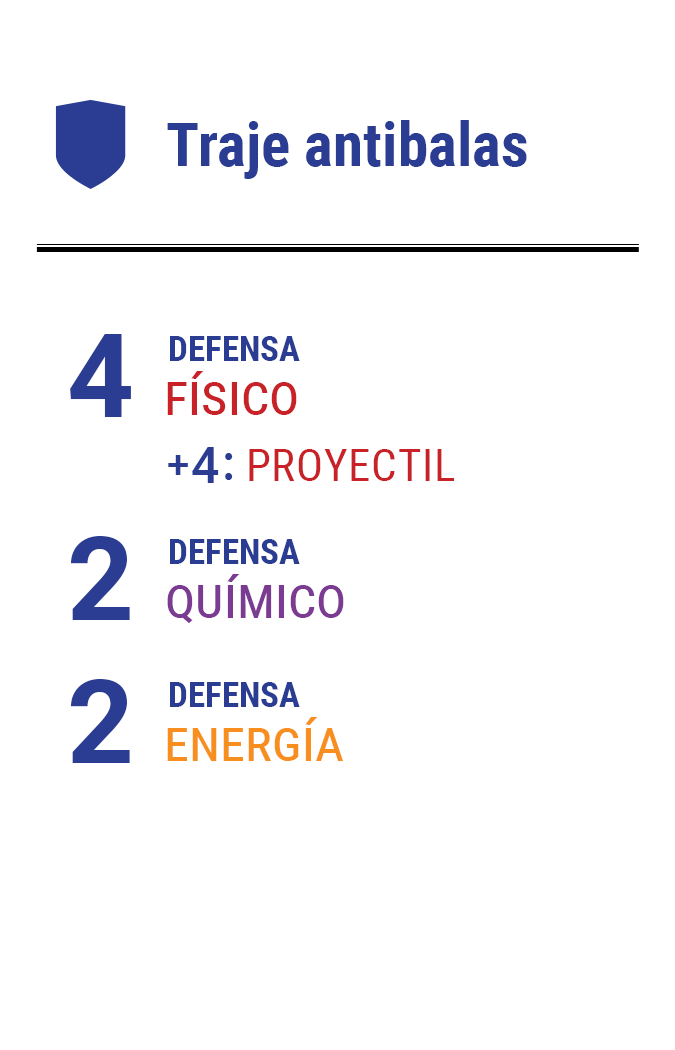
<style>
.page{position:relative;width:675px;height:1050px;background:#ffffff}
.page>*{position:absolute;margin:0}
.t1{font:61.2px "RobotoCondensed-Bold";color:#2a3d93}
.t2{font:116.7px "Roboto-Bold";letter-spacing:-0.16em;color:#2a3d93}
.t3{font:35px "RobotoCondensed-Bold";color:#2a3d93}
.t4{font:58.3px "RobotoCondensed-Regular";color:#c82127;font-variant:small-caps}
.t5{font:49.8px "Roboto-Medium";letter-spacing:-0.1em;color:#2a3d93}
.t6{font:39.7px "Roboto-Medium";letter-spacing:-0.1em;color:#2a3d93}
.t7{font:44.6px "RobotoCondensed-Regular";letter-spacing:0.02em;color:#c82127;text-transform:uppercase}
.t8{font:58.3px "RobotoCondensed-Regular";color:#7c3b92;font-variant:small-caps}
.t9{font:58.3px "RobotoCondensed-Regular";color:#f78e1e;font-variant:small-caps}
</style>
<div class="page">
<p class="t1" style="left:167px;top:120px;width:360px;height:59px">Traje antibalas</p>
<p class="t2" style="left:70px;top:334px;width:61px;height:83px">4</p>
<p class="t3" style="left:170px;top:336px;width:130px;height:25px">DEFENSA</p>
<p class="t4" style="left:167px;top:371px;width:130px;height:44px">físico</p>
<p class="t5" style="left:168px;top:447px;width:65px;height:36px"><span class="t6">+ </span>4 :</p>
<p class="t7" style="left:249px;top:449px;width:205px;height:32px">proyectil</p>
<p class="t2" style="left:71px;top:536px;width:59px;height:84px">2</p>
<p class="t3" style="left:170px;top:539px;width:130px;height:25px">DEFENSA</p>
<p class="t8" style="left:167px;top:574px;width:177px;height:50px">químico</p>
<p class="t2" style="left:71px;top:679px;width:59px;height:84px">2</p>
<p class="t3" style="left:170px;top:682px;width:130px;height:25px">DEFENSA</p>
<p class="t9" style="left:167px;top:717px;width:177px;height:44px">energía</p>
</div>
